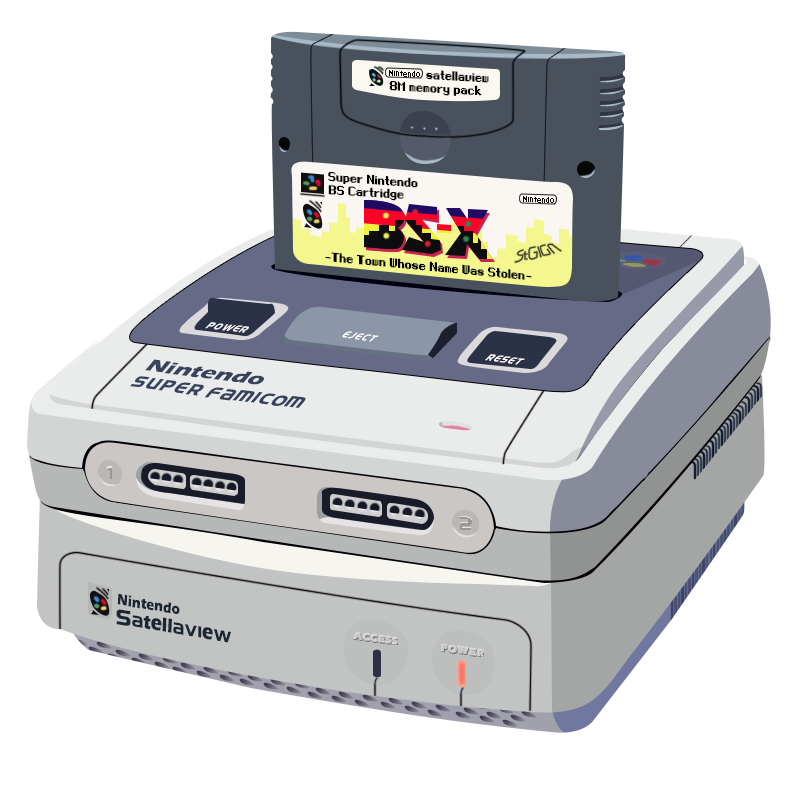
<style>
.page{position:relative;width:800px;height:800px;background:#ffffff}
.page>*{position:absolute;margin:0}
.t1{font:11px "Final-French";color:#000000}
.t2{font:10.8px "Final-French";color:#000000}
.t3{font:12.1px "SuperFamiFont";letter-spacing:0.1em;color:#ffffff;scale:0.61 1}
.t4{font:20.3px "ErasITC-Bold";color:#38425d;scale:1.2 1}
.t5{font:15.7px "ErasITC-Bold";color:#1d2733;scale:0.84 1}
.t6{font:15.7px "SuperFamiFont";color:#1d2733;scale:0.84 1}
.t7{font:21.7px "SuperFamiFont";color:#1d2733;scale:0.84 1}
.t8{font:20.7px "ErasITC-Bold";color:#1d2733;scale:0.84 1}
.t9{font:22.7px "ErasITC-Bold";color:#1d2733;scale:0.84 1}
.t10{font:10px "ErasITC-Bold";letter-spacing:0.1em;color:#b7b9b8}
</style>
<div class="page">
<p class="t1" style="left:426px;top:70px;width:63px;height:13px;rotate:3deg">satellaview</p>
<p class="t1" style="left:389px;top:81px;width:93px;height:15px;rotate:3deg">8M memory pack</p>
<p class="t2" style="left:328px;top:171px;width:90px;height:17px;rotate:4deg">Super Nintendo</p>
<p class="t2" style="left:328px;top:185px;width:76px;height:16px;rotate:3deg">BS Cartridge</p>
<p class="t2" style="left:325px;top:252px;width:207px;height:28px;rotate:5deg">-The Town Whose Name Was Stolen-</p>
<p class="t3" style="left:205px;top:322px;width:44px;height:11px;rotate:7deg">power</p>
<p class="t3" style="left:342px;top:331px;width:37px;height:11px;rotate:7deg">EJECT</p>
<p class="t4" style="left:145px;top:359px;width:119px;height:26px;rotate:7deg">Nintendo</p>
<p class="t3" style="left:485px;top:354px;width:40px;height:11px;rotate:7deg">RESET</p>
<p class="t5" style="left:117px;top:593px;width:63px;height:21px;rotate:9deg">Nintendo</p>
<p class="t6" style="left:116px;top:609px;width:115px;height:34px;rotate:9deg"><span class="t7">S</span>a<span class="t8">t</span><span class="t9">e</span><span class="t8">ll</span>avi<span class="t9">e</span>w</p>
<p class="t10" style="left:441px;top:644px;width:43px;height:13px;rotate:7deg">POWER</p>
</div>
